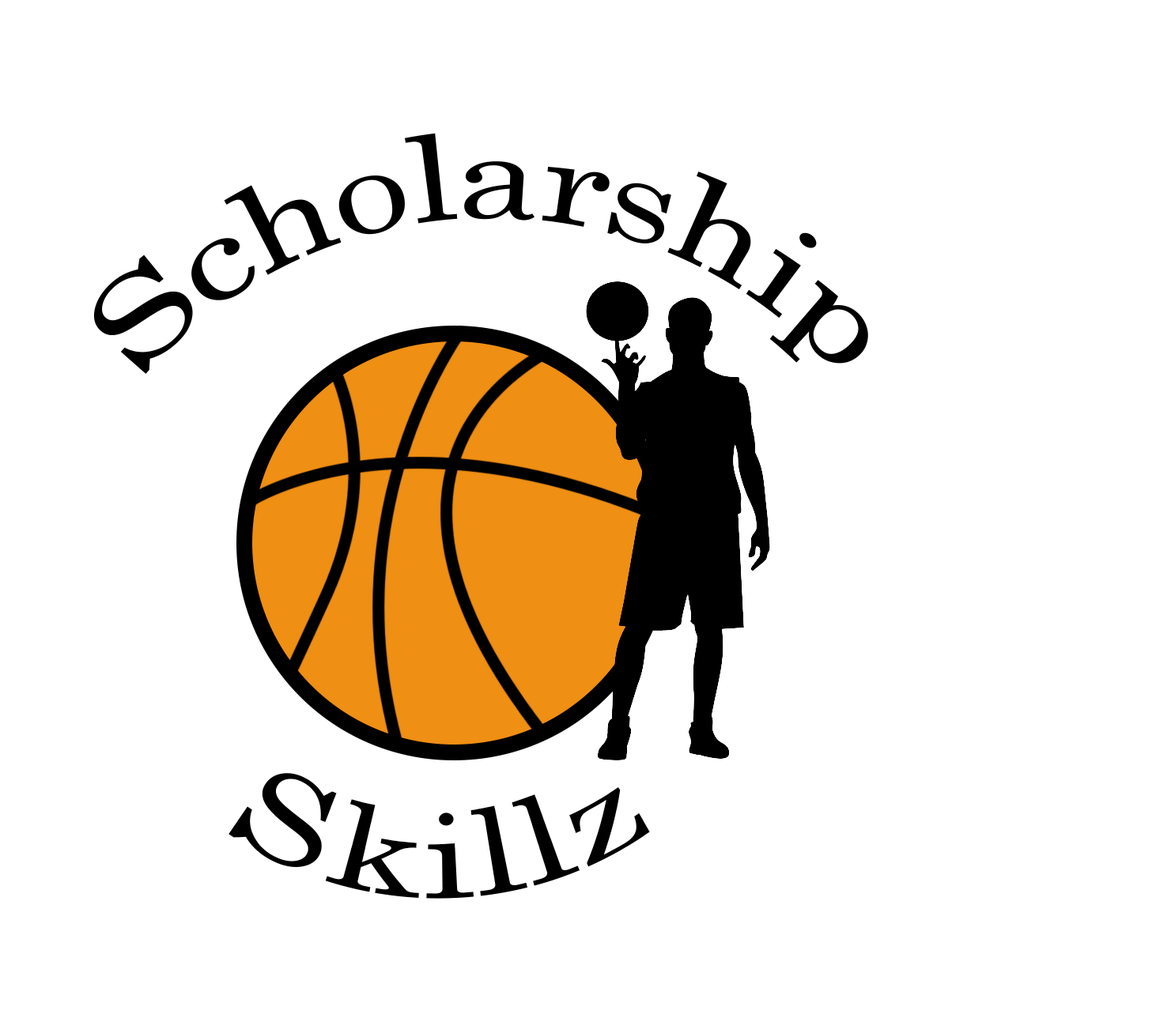
<style>
.page{position:relative;width:1171px;height:1018px;background:#ffffff}
.page>*{position:absolute;margin:0}
.t1{font:118.6px "Century";color:#000000}
</style>
<div class="page">
<p class="t1" style="left:93px;top:133px;width:775px;height:241px">Scholarship</p>
<p class="t1" style="left:228px;top:773px;width:422px;height:126px">Skillz</p>
</div>
